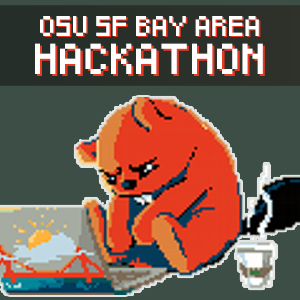
<style>
.page{position:relative;width:300px;height:300px;background:#3c4e46}
.page>*{position:absolute;margin:0}
.t1{font:16.6px "Pixeled";color:#ffffff}
.t2{font:16.6px "Pixeled"}
.t3{font:25.3px "Pixeled";color:#ffffff}
.t4{font:25.3px "Pixeled"}
</style>
<div class="page">
<p class="t1" style="left:40px;top:16px;width:219px;height:20px">OSU SF BAY AREA</p>
<p class="t2" style="left:41px;top:17px;width:220px;height:20px">OSU SF BAY AREA</p>
<p class="t3" style="left:35px;top:43px;width:228px;height:31px">HACKATHON</p>
<p class="t4" style="left:37px;top:45px;width:228px;height:31px">HACKATHON</p>
</div>
